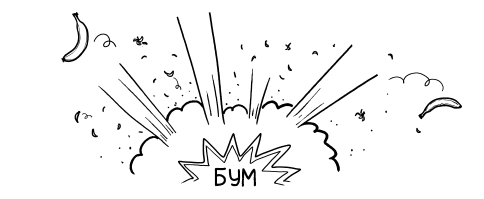
<style>
.page{position:relative;width:484px;height:199px;background:#ffffff}
.page>*{position:absolute;margin:0}
.t1{font:25px "SarcasmInk";color:#000000}
</style>
<div class="page">
<p class="t1" style="left:214px;top:167px;width:42px;height:20px">Бум</p>
</div>
